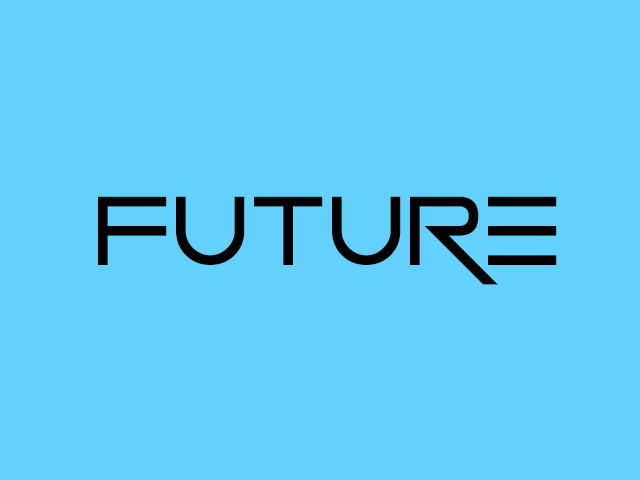
<style>
.page{position:relative;width:640px;height:480px;background:#64d0fd}
.page>*{position:absolute;margin:0}
.t1{font:100px "VerminVibes2";color:#000000}
</style>
<div class="page">
<p class="t1" style="left:98px;top:196px;width:459px;height:89px">FUTURE</p>
</div>
